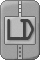
<style>
.page{position:relative;width:40px;height:60px}
.page>*{position:absolute;margin:0}
.t1{font:33.3px "OCRAExtended";letter-spacing:-0.22em;color:#414141}
</style>
<div class="page">
<p class="t1" style="left:7px;top:19px;width:27px;height:21px">LD</p>
</div>
